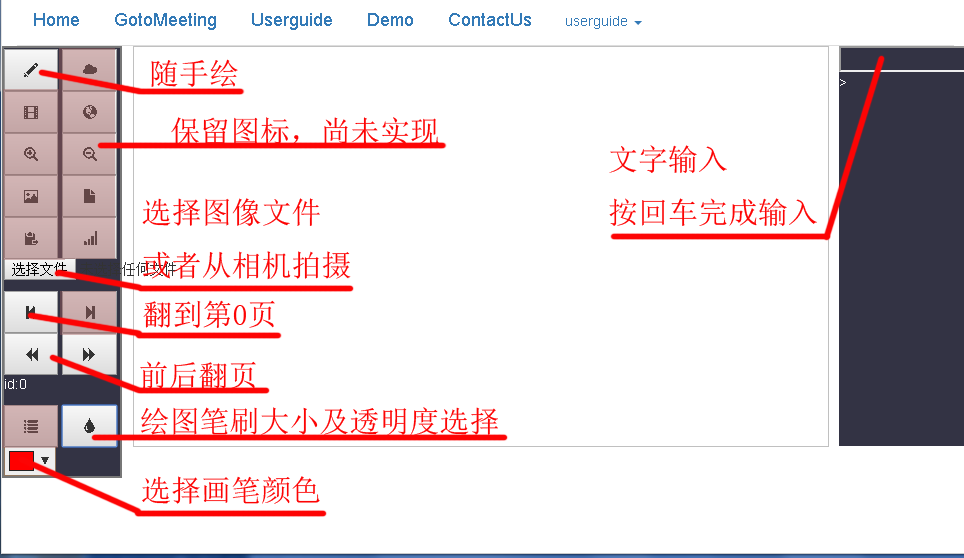
<style>
.page{position:relative;width:964px;height:558px;background:#ffffff}
.page>*{position:absolute;margin:0}
.t1{font:30px "SimSun";color:#fd0404}
</style>
<div class="page">
<p class="t1" style="left:151px;top:59px;width:87px;height:28px">随手绘</p>
<p class="t1" style="left:171px;top:117px;width:268px;height:28px">保留图标，尚未实现</p>
<p class="t1" style="left:609px;top:145px;width:208px;height:81px">文字输入<br>按回车完成输入</p>
<p class="t1" style="left:142px;top:198px;width:209px;height:82px">选择图像文件<br>或者从相机拍摄</p>
<p class="t1" style="left:143px;top:300px;width:132px;height:28px">翻到第0页</p>
<p class="t1" style="left:140px;top:361px;width:116px;height:28px">前后翻页</p>
<p class="t1" style="left:141px;top:407px;width:357px;height:28px">绘图笔刷大小及透明度选择</p>
<p class="t1" style="left:142px;top:476px;width:178px;height:28px">选择画笔颜色</p>
</div>
